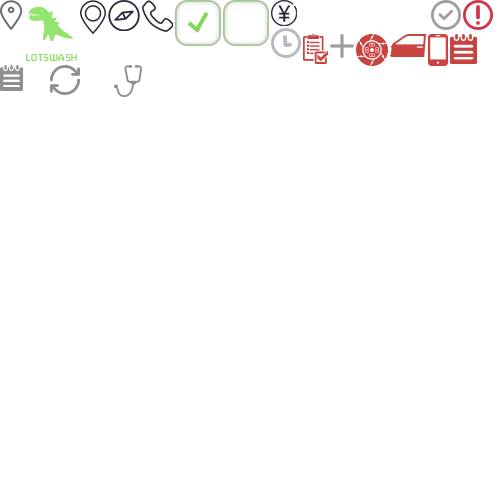
<style>
.page{position:relative;width:500px;height:500px;background:#ffffff}
.page>*{position:absolute;margin:0}
.t1{font:10px "MFShangHei_Noncommercial-Regular";letter-spacing:0.1em;color:#8edf66}
</style>
<div class="page">
<p class="t1" style="left:26px;top:54px;width:51px;height:7px">LOTSWASH</p>
</div>
